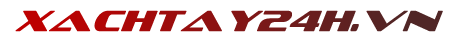
<style>
.page{position:relative;width:470px;height:40px;background:#ffffff}
.page>*{position:absolute;margin:0}
.t1{font:29.1px "SofachromeItalic";letter-spacing:0.025em;font-weight:bold;scale:0.89 1}
</style>
<div class="page">
<p class="t1" style="left:15px;top:10px;width:428px;height:22px">XACHTAY24H.VN</p>
</div>
